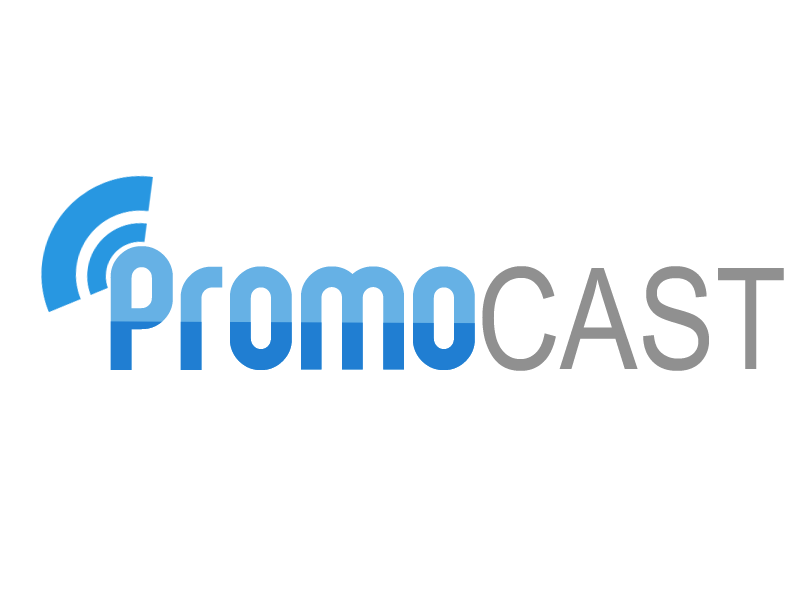
<style>
.page{position:relative;width:800px;height:600px;background:#ffffff}
.page>*{position:absolute;margin:0}
.t1{font:226.9px "Globus"}
.t2{font:141.3px "ArialNarrow";color:#909090}
</style>
<div class="page">
<p class="t1" style="left:110px;top:246px;width:365px;height:124px">Promo</p>
<p class="t2" style="left:482px;top:266px;width:302px;height:105px">CAST</p>
</div>
